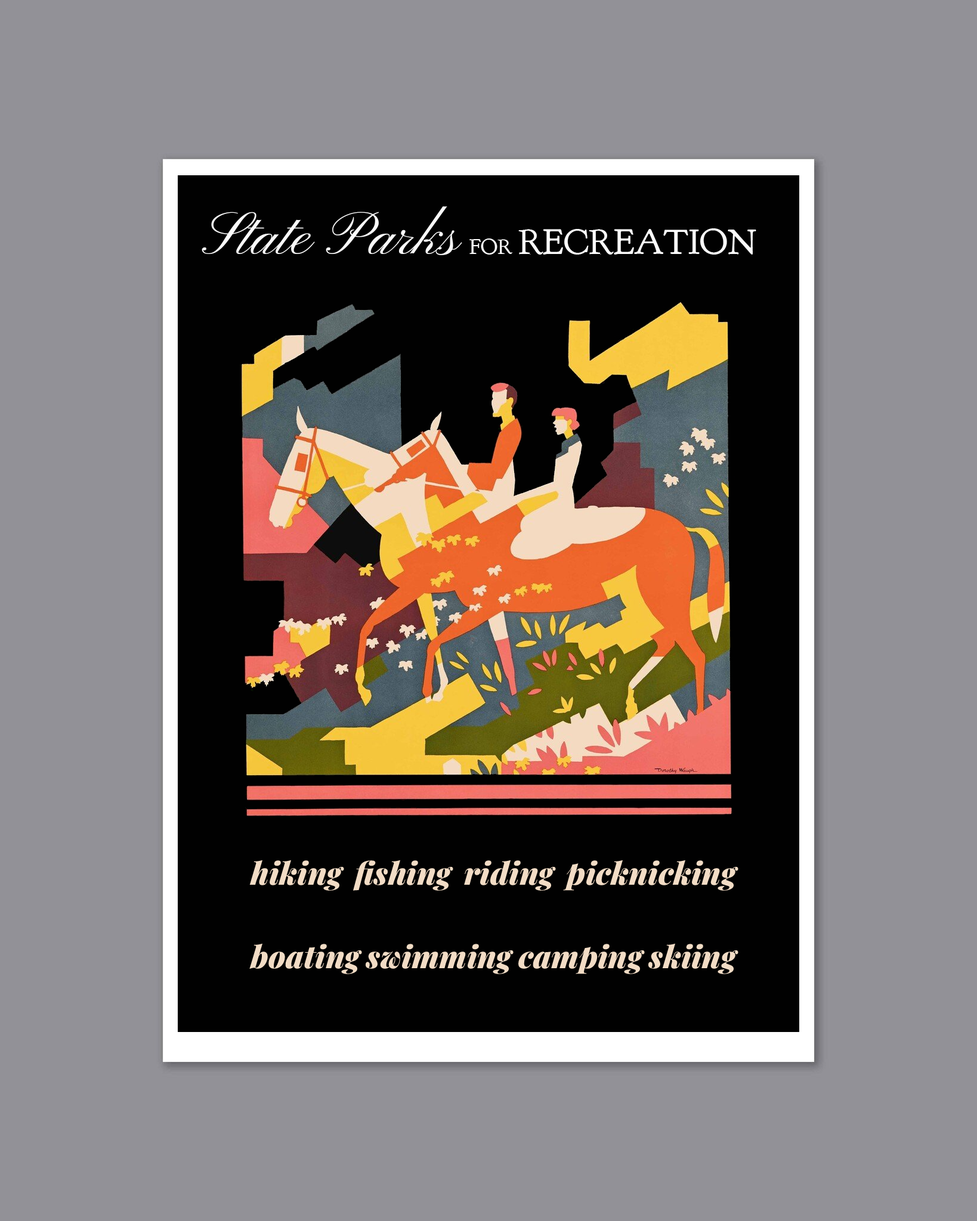
<style>
.page{position:relative;width:977px;height:1221px;background:#929197}
.page>*{position:absolute;margin:0}
.t1{font:77.5px "Kapakana-Regular";color:#fbfbfb}
.t2{font:35.8px "GoudyBookletter1911";color:#fbfbfb}
.t3{font:21.5px "GoudyBookletter1911";color:#fbfbfb}
.t4{font:31px/83.5px "PlayfairDisplayItalic-BlackItalic";color:#f2dcc5}
</style>
<div class="page">
<p class="t1" style="left:202px;top:206px;width:260px;height:49px">State Parks</p>
<p class="t2" style="left:469px;top:228px;width:287px;height:27px"><span class="t3">FOR </span>RECREATION</p>
<p class="t4" style="left:249px;top:860px;width:489px;height:114px;text-align:justify">hiking fishing riding picknicking boating swimming camping skiing</p>
</div>
